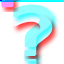
<style>
.page{position:relative;width:64px;height:64px;background:#ffffff}
.page>*{position:absolute;margin:0}
.t1{font:73.3px "PrimaSansBT-Roman";color:#93f9ff;font-weight:bold;scale:1.27 1}
</style>
<div class="page">
<p class="t1" style="left:13px;top:2px;width:40px;height:58px">?</p>
</div>
